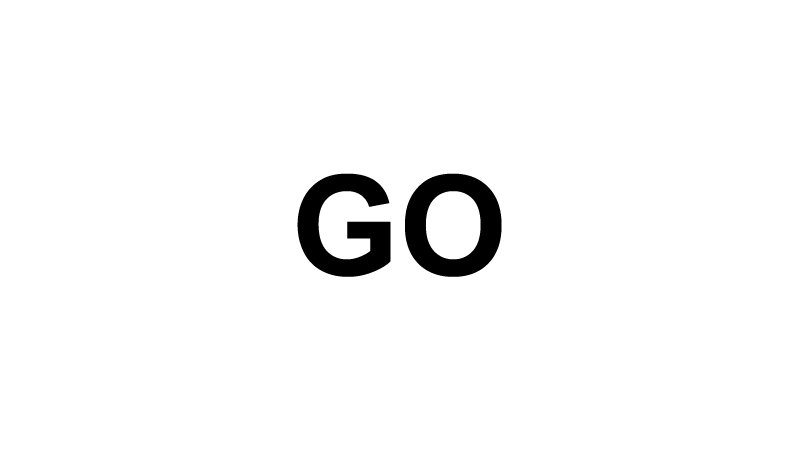
<style>
.page{position:relative;width:800px;height:450px;background:#ffffff}
.page>*{position:absolute;margin:0}
.t1{font:138.9px "Arial-BoldMT";color:#000000}
</style>
<div class="page">
<p class="t1" style="left:297px;top:173px;width:205px;height:104px">GO</p>
</div>
